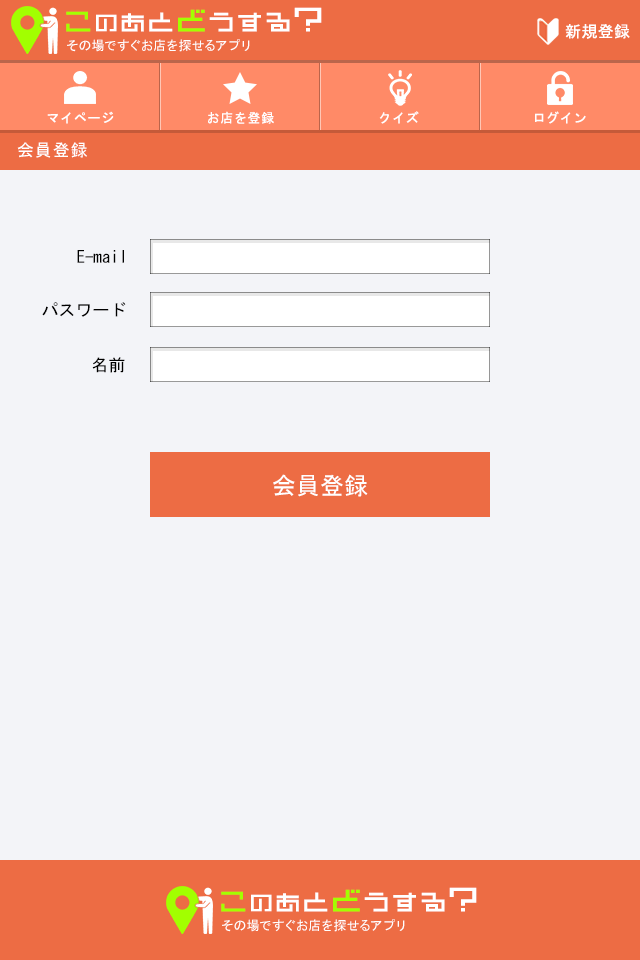
<style>
.page{position:relative;width:640px;height:960px;background:#f3f4f8}
.page>*{position:absolute;margin:0}
.t1{font:27.6px "DBstraight12";letter-spacing:0.05em;color:#ffffff;font-weight:bold;scale:0.96 1}
.t2{font:28.8px "DBstraight12";letter-spacing:0.05em;color:#a2ff00;font-weight:bold;scale:0.96 1}
.t3{font:24.5px "DBstraight12";letter-spacing:0.05em;color:#ffffff;font-weight:bold;scale:0.96 1}
.t4{font:26.7px "DBstraight12";letter-spacing:0.05em;color:#ffffff;font-weight:bold;scale:0.96 1}
.t5{font:27.7px "DBstraight12";letter-spacing:0.05em;color:#ffffff;font-weight:bold;scale:0.96 1}
.t6{font:31.9px "DBstraight12";letter-spacing:0.05em;color:#a2ff00;font-weight:bold;scale:0.96 1}
.t7{font:34.9px "DBstraight12";letter-spacing:0.05em;color:#ffffff;font-weight:bold;scale:0.96 1}
.t8{font:16px "MS-Gothic";letter-spacing:0.05em;color:#ffffff}
.t9{font:13px "MS-Gothic";letter-spacing:0.05em;color:#ffffff}
.t10{font:17px "MS-Gothic";letter-spacing:0.05em;color:#ffffff}
.t11{font:17px "MS-Gothic";color:#000000}
.t12{font:24px "MS-Gothic";color:#ffffff}
</style>
<div class="page">
<p class="t1" style="left:66px;top:7px;width:256px;height:25px"><span class="t2">こ</span><span class="t3">の</span><span class="t4">あ</span><span class="t5">と</span><span class="t6">ど</span>うする<span class="t7">?</span></p>
<p class="t8" style="left:565px;top:24px;width:65px;height:15px">新規登録</p>
<p class="t9" style="left:67px;top:39px;width:183px;height:13px">その場ですぐお店を探せるアプリ</p>
<p class="t9" style="left:47px;top:111px;width:67px;height:13px">マイページ</p>
<p class="t9" style="left:208px;top:111px;width:66px;height:13px">お店を登録</p>
<p class="t9" style="left:379px;top:111px;width:40px;height:13px">クイズ</p>
<p class="t9" style="left:535px;top:111px;width:51px;height:13px">ログイン</p>
<p class="t10" style="left:17px;top:142px;width:70px;height:16px">会員登録</p>
<p class="t11" style="left:77px;top:250px;width:47px;height:13px">E-mail</p>
<p class="t11" style="left:42px;top:302px;width:84px;height:15px">パスワード</p>
<p class="t11" style="left:92px;top:357px;width:33px;height:16px">名前</p>
<p class="t12" style="left:273px;top:474px;width:95px;height:23px">会員登録</p>
<p class="t1" style="left:221px;top:887px;width:256px;height:25px"><span class="t2">こ</span><span class="t3">の</span><span class="t4">あ</span><span class="t5">と</span><span class="t6">ど</span>うする<span class="t7">?</span></p>
<p class="t9" style="left:222px;top:919px;width:183px;height:13px">その場ですぐお店を探せるアプリ</p>
</div>
